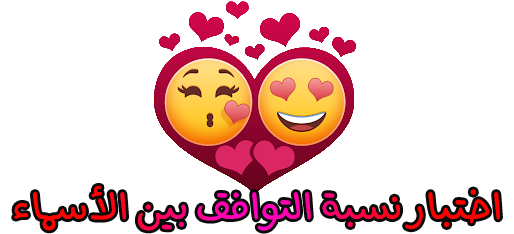
<style>
.page{position:relative;width:514px;height:234px;background:#ffffff}
.page>*{position:absolute;margin:0}
.t1{font:49px "AMassirBallpoint"}
</style>
<div class="page">
<p class="t1" style="left:14px;top:186px;width:486px;height:45px">اختبار نسبة التوافق بين الأسماء</p>
</div>
